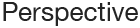
<style>
.page{position:relative;width:140px;height:28px;background:#ffffff}
.page>*{position:absolute;margin:0}
.t1{font:26.1px "HelveticaNeue";color:#242424}
</style>
<div class="page">
<p class="t1" style="left:3px;top:2px;width:135px;height:24px">Perspective</p>
</div>
